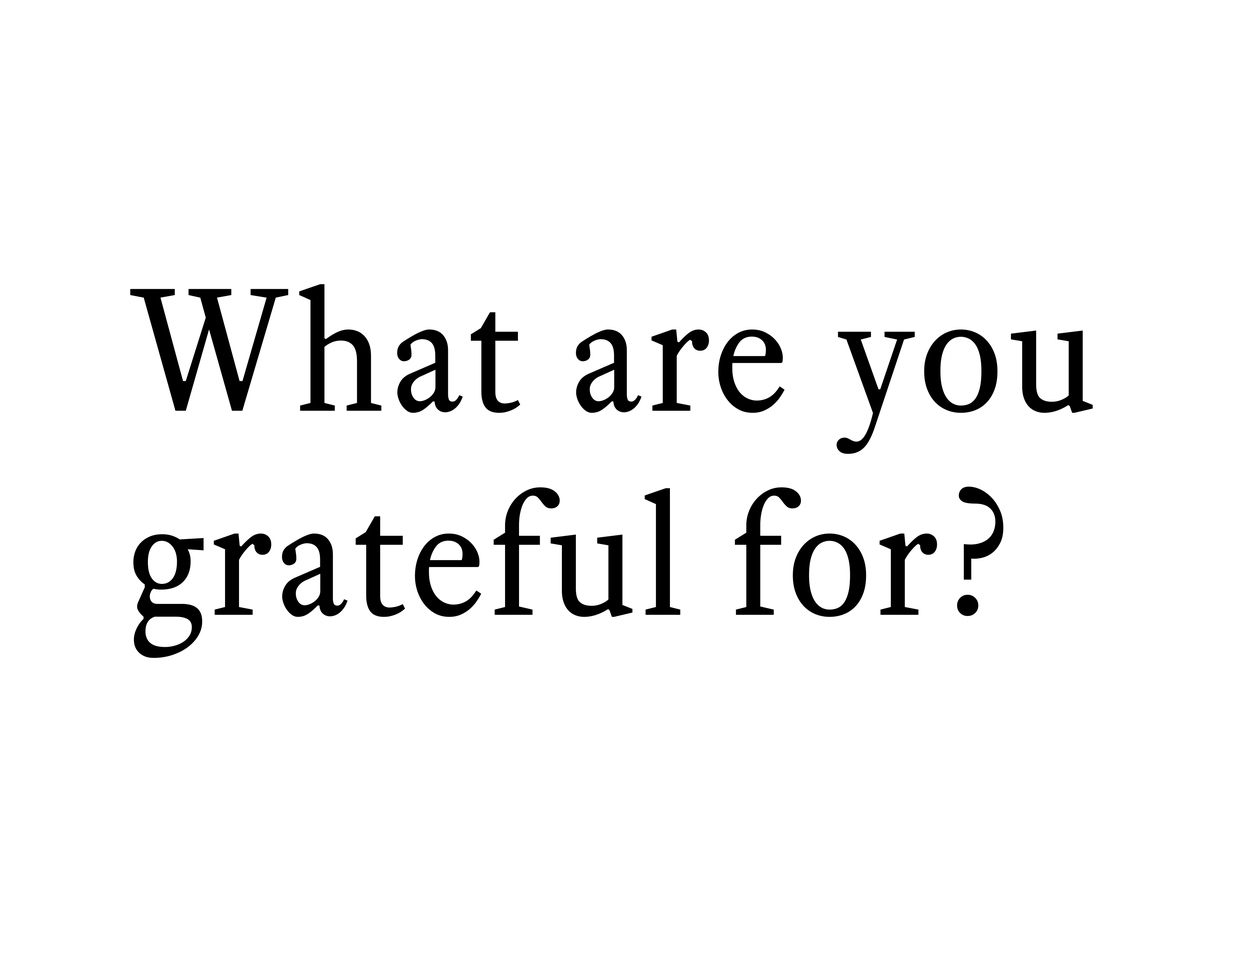
<style>
.page{position:relative;width:1242px;height:960px;background:#ffffff}
.page>*{position:absolute;margin:0}
.t1{font:172.5px/203.9px "EquityTextB";letter-spacing:0.025em;color:#000000}
</style>
<div class="page">
<p class="t1" style="left:130px;top:284px;width:963px;height:374px">What are you<br>grateful for?</p>
</div>
